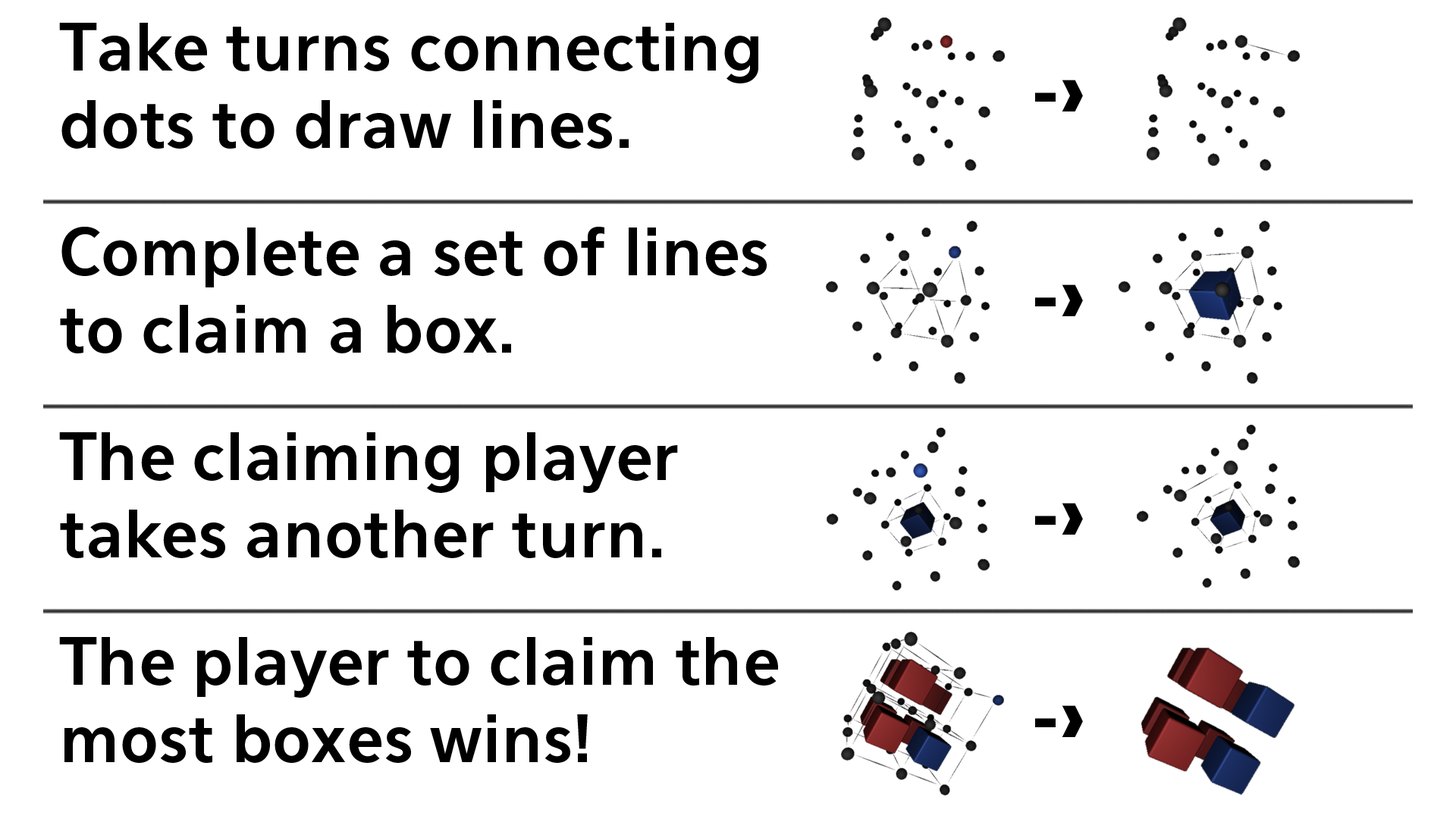
<style>
.page{position:relative;width:1456px;height:819px;background:#ffffff}
.page>*{position:absolute;margin:0}
.t1{font:64.5px "Eau-SansBold";color:#000000}
.t2{font:75.8px "Eau-SansBlack";color:#000000}
</style>
<div class="page">
<p class="t1" style="left:59px;top:23px;width:699px;height:126px">Take turns connecting dots to draw lines.</p>
<p class="t2" style="left:1035px;top:80px;width:48px;height:31px">-&gt;</p>
<p class="t1" style="left:60px;top:227px;width:707px;height:126px">Complete a set of lines to claim a box.</p>
<p class="t2" style="left:1035px;top:284px;width:48px;height:32px">-&gt;</p>
<p class="t1" style="left:59px;top:432px;width:619px;height:126px">The claiming player takes another turn.</p>
<p class="t2" style="left:1035px;top:503px;width:48px;height:32px">-&gt;</p>
<p class="t1" style="left:59px;top:637px;width:719px;height:126px">The player to claim the most boxes wins!</p>
<p class="t2" style="left:1035px;top:705px;width:48px;height:32px">-&gt;</p>
</div>
